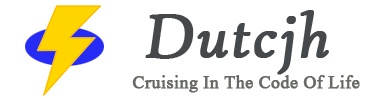
<style>
.page{position:relative;width:370px;height:100px;background:#ffffff}
.page>*{position:absolute;margin:0}
.t1{font:67px "HighTowerText-Italic";color:#45494b;font-weight:bold}
.t2{font:22px "Aparajita";color:#666964;font-weight:bold}
</style>
<div class="page">
<p class="t1" style="left:145px;top:10px;width:184px;height:65px">Dutcjh</p>
<p class="t2" style="left:132px;top:75px;width:228px;height:18px">Cruising In The Code Of Life</p>
</div>
